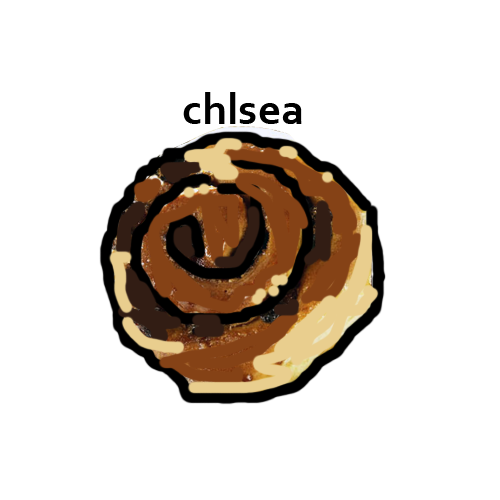
<style>
.page{position:relative;width:500px;height:500px;background:#ffffff}
.page>*{position:absolute;margin:0}
.t1{font:45.3px "Corbel-Bold";color:#000000}
</style>
<div class="page">
<p class="t1" style="left:183px;top:92px;width:119px;height:32px">chlsea</p>
</div>
